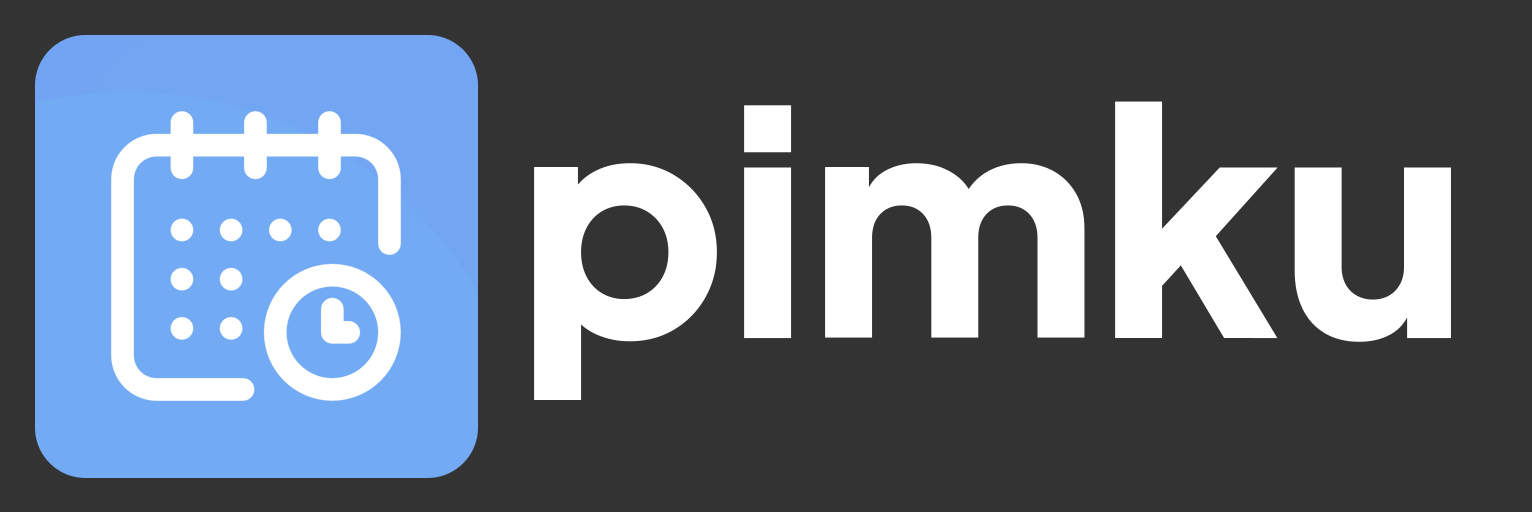
<style>
.page{position:relative;width:1532px;height:512px;background:#333333}
.page>*{position:absolute;margin:0}
.t1{font:312.3px "PlusJakartaSansRoman-ExtraBold";color:#ffffff}
</style>
<div class="page">
<p class="t1" style="left:534px;top:101px;width:917px;height:299px">pimku</p>
</div>
